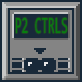
<style>
.page{position:relative;width:82px;height:82px;background:#182939}
.page>*{position:absolute;margin:0}
.t1{font:23.4px/31.2px "Consolas";color:#06800f;scale:0.51 1}
</style>
<div class="page">
<p class="t1" style="left:16px;top:17px;width:51px;height:17px;text-align:center">P2 CTRLS<br><br><br><br>  ssdaasd</p>
</div>
